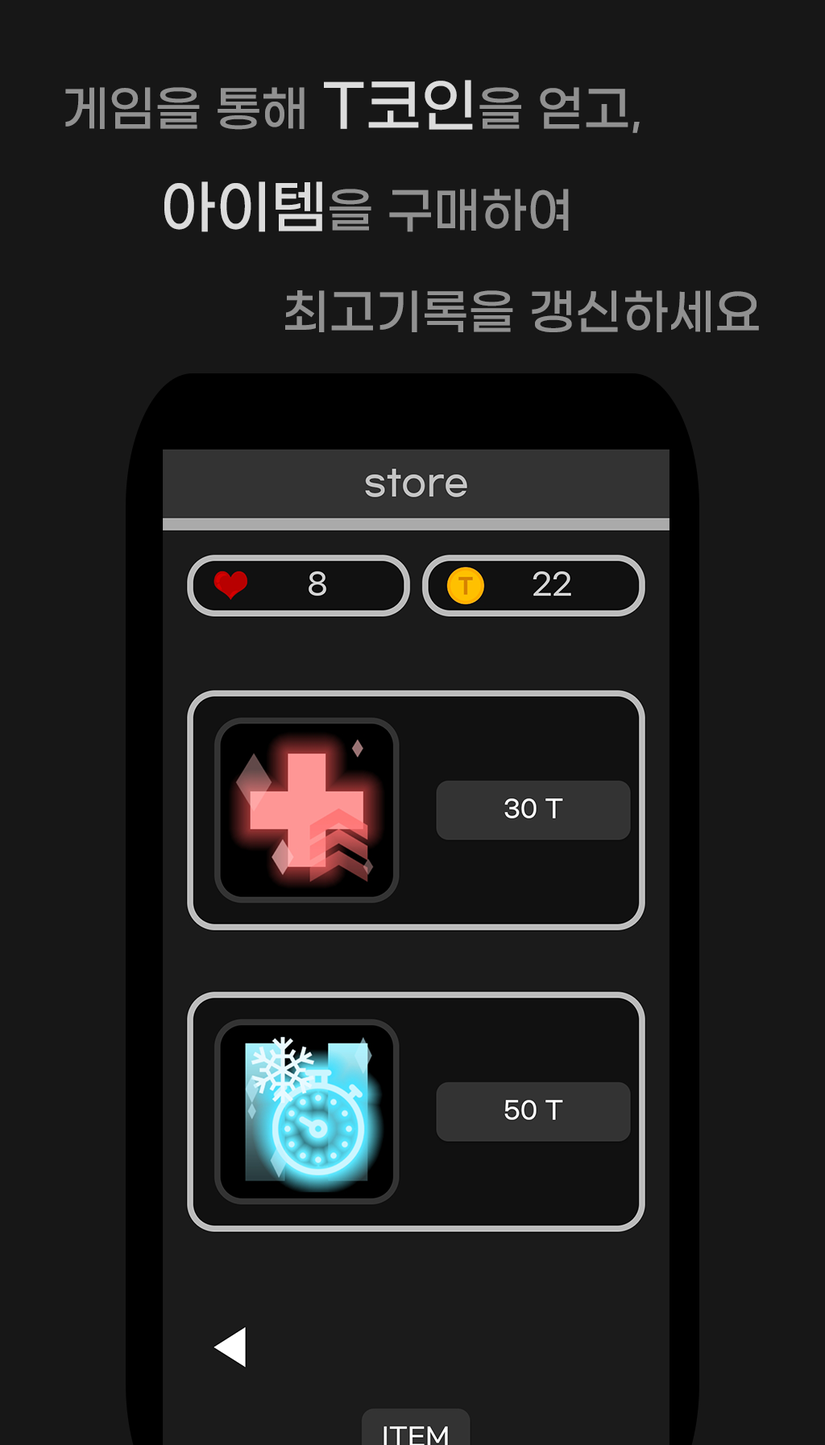
<style>
.page{position:relative;width:825px;height:1445px;background:#171717}
.page>*{position:absolute;margin:0}
.t1{font:48.4px "GmarketSansTTFMedium";color:#919191}
.t2{font:58px "GmarketSansTTFMedium";color:#dcdcdc}
</style>
<div class="page">
<p class="t1" style="left:65px;top:80px;width:694px;height:252px">게임을 통해 <span class="t2">T코인</span>을 얻고,<br><span class="t2">      아이템</span>을 구매하여<br>              최고기록을 갱신하세요</p>
</div>
